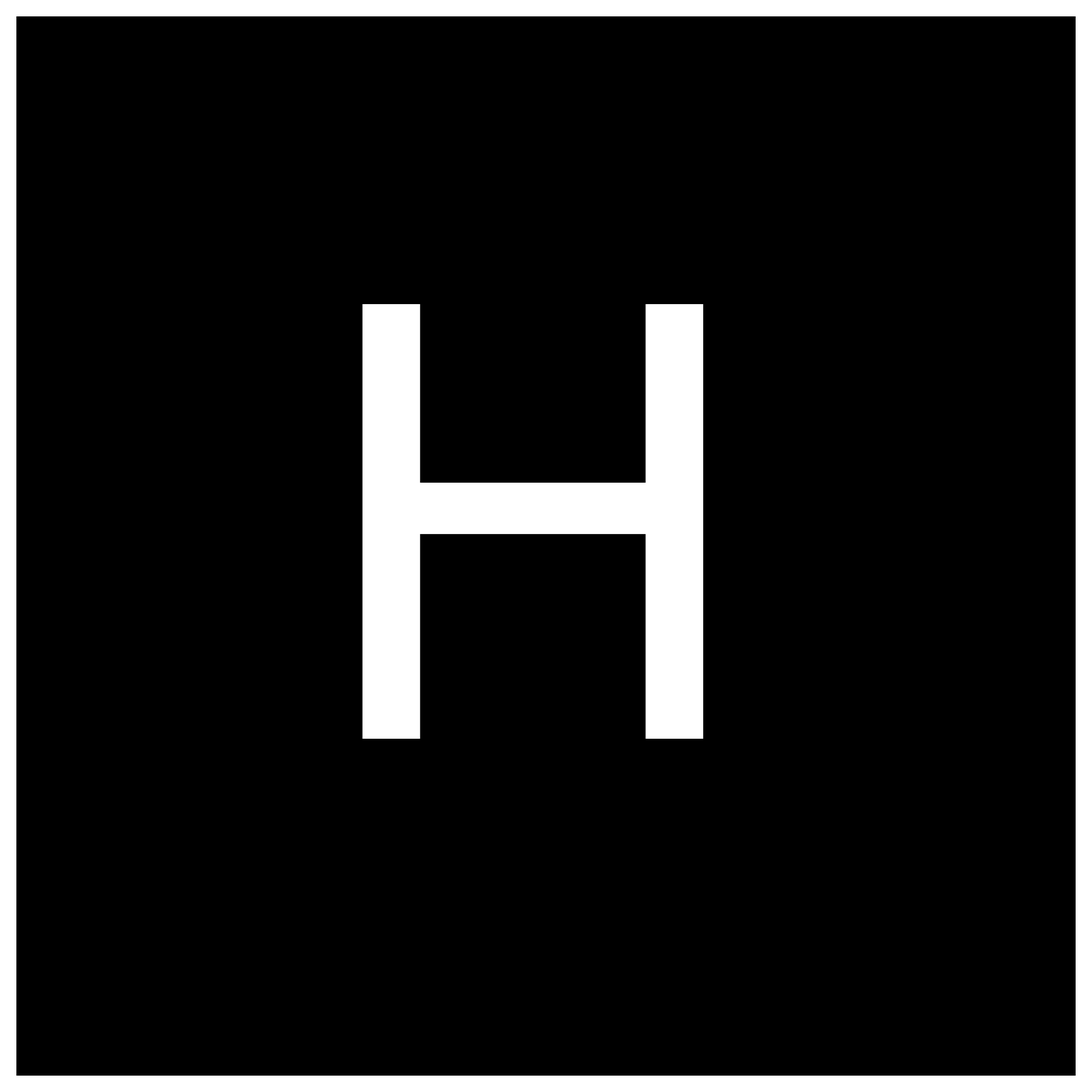
<style>
.page{position:relative;width:1092px;height:1092px;background:#000000}
.page>*{position:absolute;margin:0}
.t1{font:606.7px "ArialMT";color:#ffffff}
</style>
<div class="page">
<p class="t1" style="left:362px;top:304px;width:341px;height:435px">H</p>
</div>
